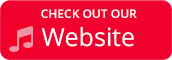
<style>
.page{position:relative;width:172px;height:60px;background:#f1012e}
.page>*{position:absolute;margin:0}
.t1{font:12px "OpenSans-Semibold";color:#ffffff}
.t2{font:25px "OpenSans";color:#ffffff}
</style>
<div class="page">
<p class="t1" style="left:41px;top:9px;width:96px;height:9px">CHECK OUT OUR</p>
<p class="t2" style="left:41px;top:27px;width:93px;height:20px">Website</p>
</div>
